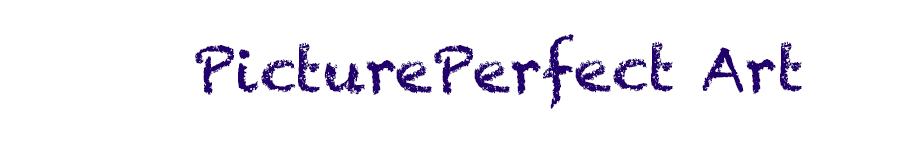
<style>
.page{position:relative;width:900px;height:150px;background:#ffffff}
.page>*{position:absolute;margin:0}
.t1{font:60px "Chalkduster";color:#21006b}
</style>
<div class="page">
<p class="t1" style="left:195px;top:34px;width:607px;height:75px">PicturePerfect Art</p>
</div>
